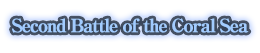
<style>
.page{position:relative;width:260px;height:53px;background:#ffffff}
.page>*{position:absolute;margin:0}
.t1{font:18px "RyuminPro-ExBold";letter-spacing:-0.08em;color:#a2cbff;font-weight:bold}
</style>
<div class="page">
<p class="t1" style="left:12px;top:18px;width:237px;height:15px">Second Battle of the Coral Sea</p>
</div>
